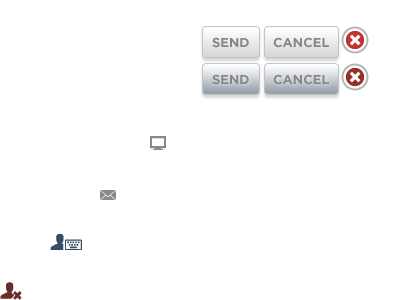
<style>
.page{position:relative;width:400px;height:300px;background:#ffffff}
.page>*{position:absolute;margin:0}
.t1{font:13px "GothamHTF-Bold";color:#888787;text-transform:uppercase}
</style>
<div class="page">
<p class="t1" style="left:212px;top:37px;width:37px;height:11px">SEND</p>
<p class="t1" style="left:273px;top:37px;width:56px;height:11px">CANCEL</p>
<p class="t1" style="left:212px;top:74px;width:37px;height:11px">SEND</p>
<p class="t1" style="left:273px;top:74px;width:56px;height:11px">CANCEL</p>
</div>
